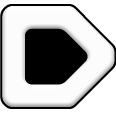
<style>
.page{position:relative;width:116px;height:116px;background:#fcfcfc}
.page>*{position:absolute;margin:0}
.t1{font:150px "NextGames";letter-spacing:-0.025em;color:#fcfcfc}
</style>
<div class="page">
<p class="t1" style="left:2px;top:6px;width:113px;height:101px">D</p>
</div>
